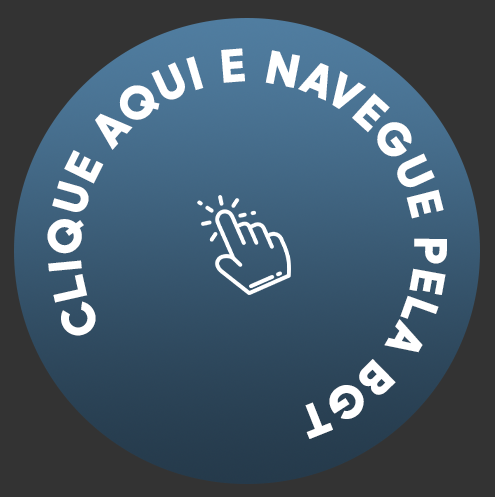
<style>
.page{position:relative;width:495px;height:497px;background:#333333}
.page>*{position:absolute;margin:0}
.t1{font:45px "Madani-Bold";letter-spacing:0.04em;color:#ffffff}
</style>
<div class="page">
<p class="t1" style="left:47px;top:48px;width:400px;height:391px">CLIQUE AQUI E NAVEGUE PELA BGT</p>
</div>
